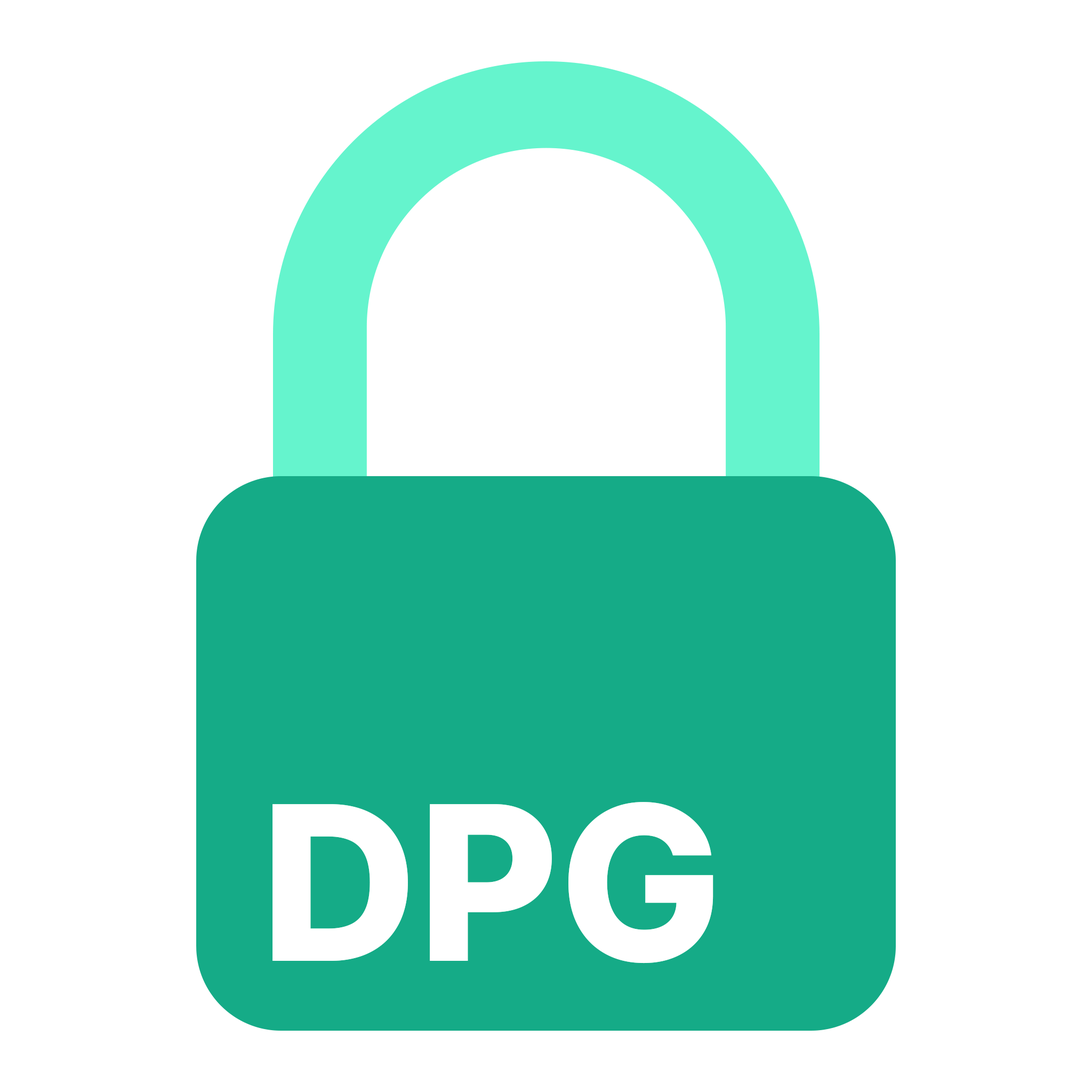
<style>
.page{position:relative;width:1092px;height:1092px;background:#ffffff}
.page>*{position:absolute;margin:0}
.t1{font:215.2px "Inter-ExtraBold";color:#ffffff}
</style>
<div class="page">
<p class="t1" style="left:272px;top:802px;width:441px;height:161px">DPG</p>
<p class="t1" style="left:272px;top:802px;width:441px;height:161px">DPG</p>
</div>
